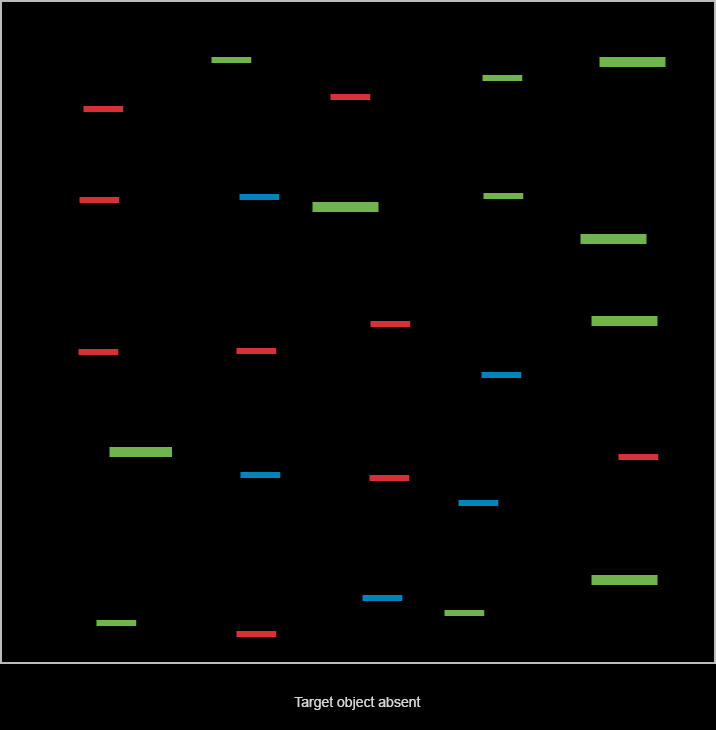
<style>
.page{position:relative;width:716px;height:730px;background:#000000}
.page>*{position:absolute;margin:0}
.t1{font:14px "ArialMT";color:#d8d8d8}
</style>
<div class="page">
<p class="t1" style="left:294px;top:696px;width:127px;height:14px">Target object absent</p>
</div>
